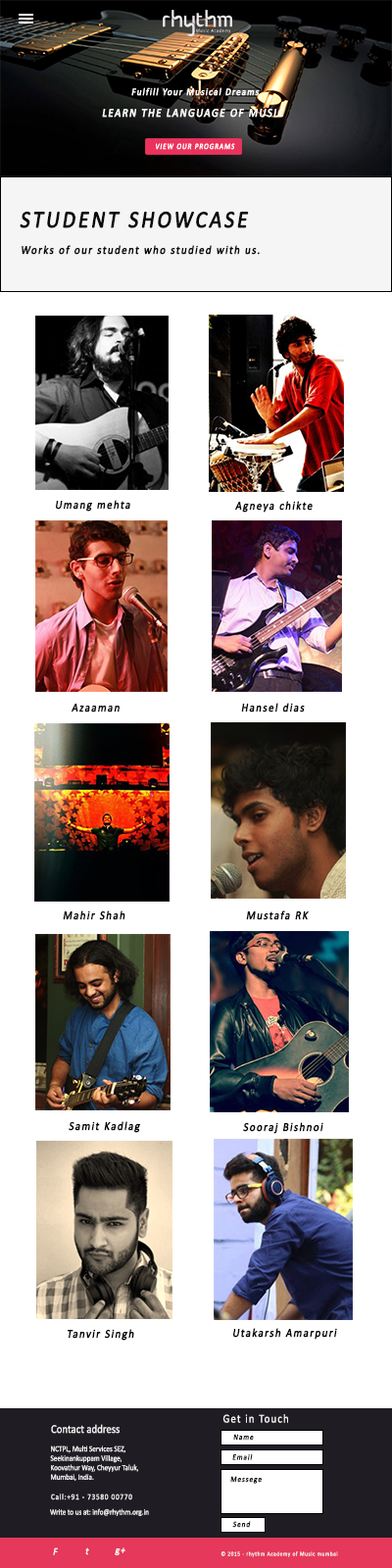
<style>
.page{position:relative;width:392px;height:1568px;background:#ffffff}
.page>*{position:absolute;margin:0}
.t1{font:10px "Calibri";letter-spacing:0.105em;color:#fdfdfd;font-weight:bold;font-style:italic;scale:0.88 1}
.t2{font:12px "Calibri";letter-spacing:0.105em;color:#fdfdfd;font-weight:bold;font-style:italic;scale:0.88 1}
.t3{font:8px "Calibri";letter-spacing:0.105em;color:#fefcfc;font-weight:bold;font-style:italic;scale:0.87 1}
.t4{font:24px "Calibri";letter-spacing:0.105em;color:#0a0a0a;font-weight:bold;font-style:italic;scale:0.88 1}
.t5{font:12px "Calibri";letter-spacing:0.105em;color:#0a0a0a;font-weight:bold;font-style:italic;scale:0.88 1}
.t6{font:12px "Calibri";letter-spacing:0.105em;color:#050505;font-weight:bold;font-style:italic;scale:0.88 1}
.t7{font:12px "Calibri";letter-spacing:0.105em;color:#f6f3f4;scale:0.88 1}
.t8{font:12px "Calibri";color:#f6f3f4;scale:0.88 1}
.t9{font:8px "Calibri";letter-spacing:0.105em;color:#151515;font-weight:bold;font-style:italic;scale:0.88 1}
.t10{font:8px "Calibri";color:#f6f3f4;scale:0.88 1}
.t11{font:8px "Calibri";letter-spacing:0.105em;color:#f6f3f4;scale:0.88 1}
.t12{font:10px "Calibri";letter-spacing:0.105em;color:#f6f3f4;font-weight:bold;font-style:italic;scale:0.88 1}
.t13{font:6px "Calibri";letter-spacing:0.105em;color:#f6f3f4;scale:0.88 1}
</style>
<div class="page">
<p class="t1" style="left:131px;top:87px;width:129px;height:9px">Fulfill Your Musical Dreams</p>
<p class="t2" style="left:102px;top:108px;width:182px;height:10px">LEARN THE LANGUAGE OF MUSIC</p>
<p class="t3" style="left:156px;top:143px;width:79px;height:7px">VIEW OUR PROGRAMS</p>
<p class="t4" style="left:20px;top:211px;width:229px;height:17px">STUDENT SHOWCASE</p>
<p class="t5" style="left:22px;top:245px;width:238px;height:10px">Works of our student who studied with us.</p>
<p class="t5" style="left:56px;top:500px;width:74px;height:12px">Umang mehta</p>
<p class="t5" style="left:235px;top:501px;width:78px;height:12px">Agneya chikte</p>
<p class="t5" style="left:72px;top:704px;width:48px;height:8px">Azaaman</p>
<p class="t5" style="left:241px;top:703px;width:64px;height:9px">Hansel dias</p>
<p class="t5" style="left:63px;top:910px;width:62px;height:10px">Mahir Shah</p>
<p class="t5" style="left:246px;top:910px;width:63px;height:10px">Mustafa RK</p>
<p class="t6" style="left:69px;top:1121px;width:71px;height:12px">Samit Kadlag</p>
<p class="t6" style="left:243px;top:1122px;width:80px;height:12px">Sooraj Bishnoi</p>
<p class="t6" style="left:68px;top:1329px;width:66px;height:12px">Tanvir Singh</p>
<p class="t6" style="left:233px;top:1328px;width:104px;height:12px">Utakarsh Amarpuri</p>
<p class="t7" style="left:222px;top:1414px;width:66px;height:9px">Get in Touch</p>
<p class="t8" style="left:51px;top:1424px;width:69px;height:10px">Contact address</p>
<p class="t9" style="left:233px;top:1434px;width:21px;height:7px">Name</p>
<p class="t10" style="left:50px;top:1446px;width:88px;height:35px">NCTPL, Multi Services SEZ, <br>Seekinankuppam Village, <br>Koovathur Way, Cheyyur Taluk, <br>Mumbai, India.</p>
<p class="t9" style="left:232px;top:1453px;width:21px;height:7px">Email</p>
<p class="t9" style="left:230px;top:1476px;width:32px;height:8px">Messege</p>
<p class="t11" style="left:51px;top:1494px;width:81px;height:6px">Call:+91 - 73580 00770</p>
<p class="t10" style="left:50px;top:1508px;width:99px;height:8px">Write to us at: info@rhythm.org.in</p>
<p class="t9" style="left:232px;top:1521px;width:19px;height:7px">Send</p>
<p class="t12" style="left:53px;top:1547px;width:5px;height:8px">F</p>
<p class="t12" style="left:85px;top:1547px;width:4px;height:8px">t</p>
<p class="t12" style="left:115px;top:1547px;width:10px;height:8px">g+</p>
<p class="t13" style="left:220px;top:1551px;width:118px;height:6px">© 2015 - rhythm Academy of Music mumbai</p>
</div>
